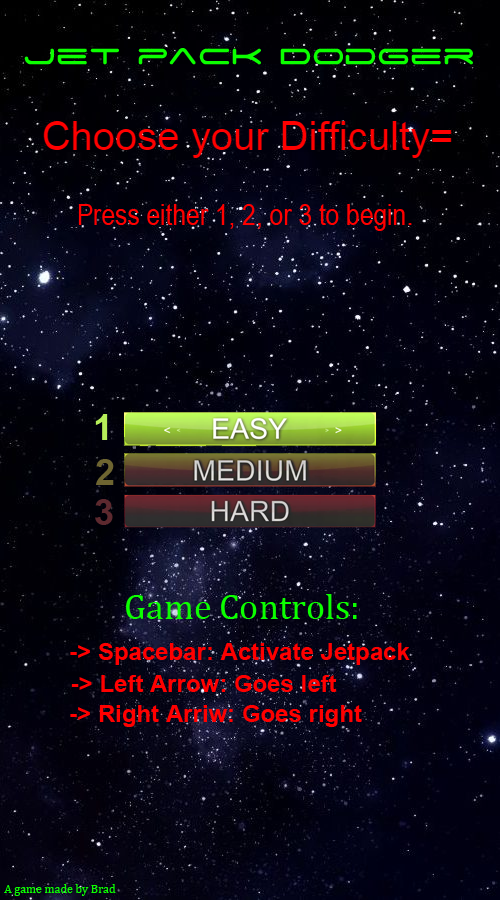
<style>
.page{position:relative;width:500px;height:900px}
.page>*{position:absolute;margin:0}
.t1{font:36px "SpaceAge";color:#0cff00}
.t2{font:30px "ArialNarrow";color:#ff0000}
.t3{font:36px "Arial-BoldMT";color:#b6ee5a}
.t4{font:36px "Arial-BoldMT";color:#6e6531}
.t5{font:36px "Arial-BoldMT";color:#5d292f}
.t6{font:36px "Cambria";color:#0cff00}
.t7{font:24px "Arial-BoldMT";color:#fe0000}
.t8{font:24px "Arial-BoldMT";color:#ff0000}
.t9{font:12px "Cambria";color:#0cff00}
</style>
<div class="page">
<p class="t1" style="left:24px;top:48px;width:449px;height:17px">Jet pack Dodger</p>
<p class="t2" style="left:78px;top:204px;width:334px;height:27px">Press either 1, 2, or 3 to begin.</p>
<p class="t3" style="left:95px;top:414px;width:13px;height:26px">1</p>
<p class="t4" style="left:96px;top:459px;width:18px;height:26px">2</p>
<p class="t5" style="left:95px;top:499px;width:18px;height:26px">3</p>
<p class="t6" style="left:126px;top:594px;width:231px;height:25px">Game Controls:</p>
<p class="t7" style="left:70px;top:643px;width:340px;height:22px">-&gt; Spacebar: Activate Jetpack</p>
<p class="t8" style="left:71px;top:675px;width:266px;height:17px">-&gt; Left Arrow: Goes left</p>
<p class="t8" style="left:70px;top:705px;width:292px;height:22px">-&gt; Right Arriw: Goes right</p>
<p class="t9" style="left:4px;top:884px;width:112px;height:12px">A game made by Brad</p>
</div>
